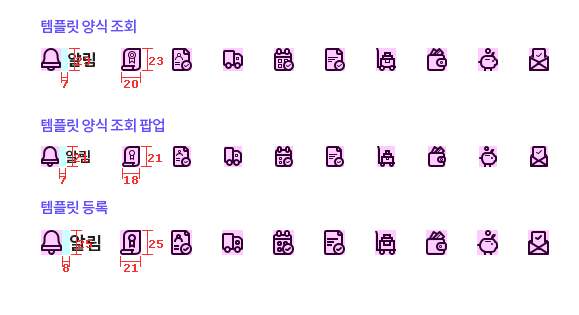
<style>
.page{position:relative;width:579px;height:315px;background:#ffffff}
.page>*{position:absolute;margin:0}
.t1{font:15px "NotoSansCJKkr-Medium";letter-spacing:-0.05em;color:#634eff}
.t2{font:16px "NotoSansCJKkr-Bold";color:#222222}
.t3{font:14px "NotoSansCJKkr-Bold";color:#222222}
.t4{font:18px "NotoSansCJKkr-Bold";color:#222222}
</style>
<div class="page">
<p class="t1" style="left:41px;top:19px;width:95px;height:15px">템플릿 양식 조회</p>
<p class="t2" style="left:68px;top:52px;width:27px;height:15px">알림</p>
<p class="t1" style="left:41px;top:118px;width:123px;height:15px">템플릿 양식 조회 팝업</p>
<p class="t3" style="left:66px;top:150px;width:24px;height:13px">알림</p>
<p class="t1" style="left:41px;top:200px;width:67px;height:15px">템플릿 등록</p>
<p class="t4" style="left:70px;top:234px;width:31px;height:17px">알림</p>
</div>
